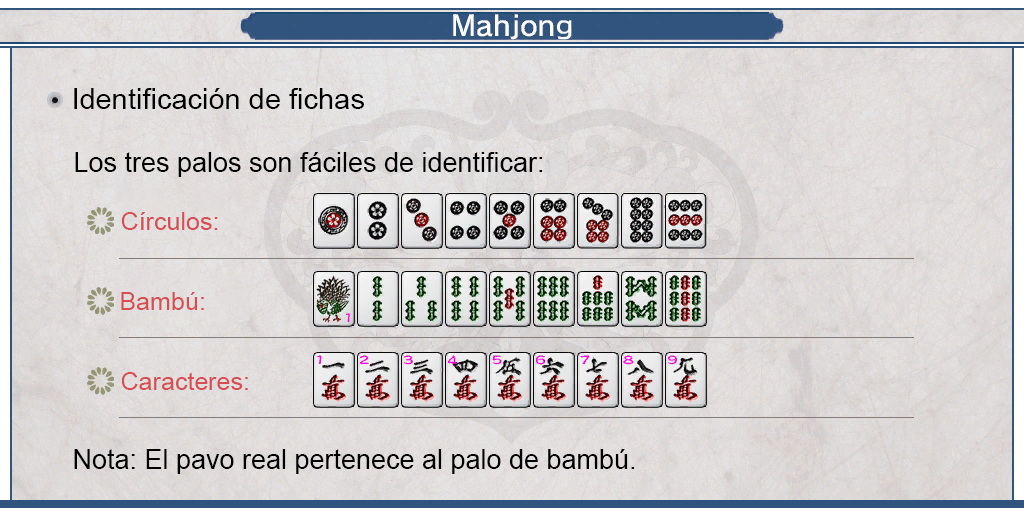
<style>
.page{position:relative;width:1024px;height:512px}
.page>*{position:absolute;margin:0}
.t1{font:29px "ArialMT";color:#000000}
.t2{font:27px "ArialMT";color:#000000}
.t3{font:24.8px "ArialMT";color:#d64d52}
</style>
<div class="page">
<p class="t1" style="left:74px;top:88px;width:290px;height:21px">Identificación de fichas</p>
<p class="t2" style="left:75px;top:152px;width:468px;height:25px">Los tres palos son fáciles de identificar:</p>
<p class="t3" style="left:121px;top:212px;width:97px;height:18px">Círculos:</p>
<p class="t3" style="left:121px;top:292px;width:83px;height:18px">Bambú:</p>
<p class="t3" style="left:121px;top:372px;width:127px;height:18px">Caracteres:</p>
<p class="t2" style="left:74px;top:449px;width:561px;height:25px">Nota: El pavo real pertenece al palo de bambú.</p>
</div>
